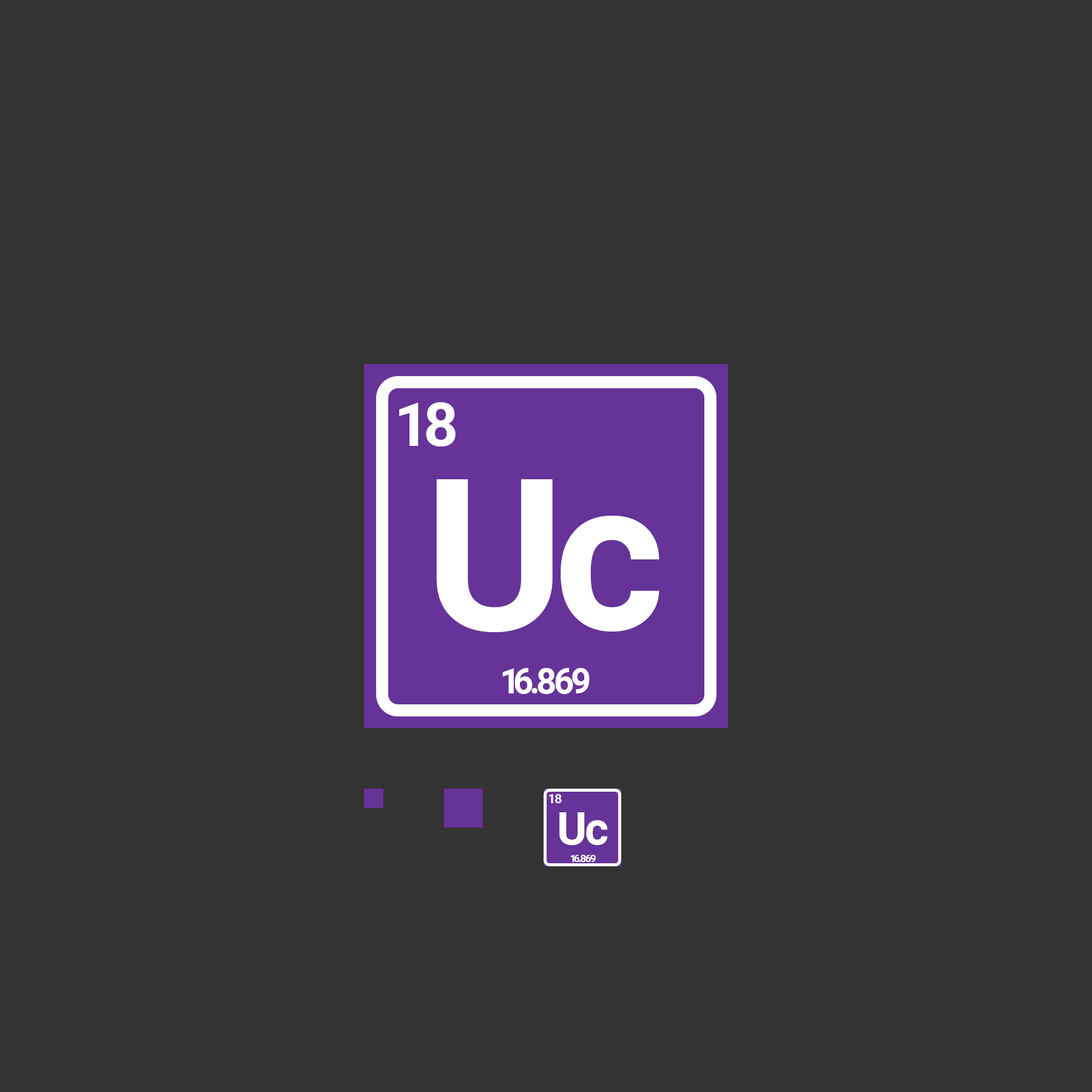
<style>
.page{position:relative;width:1092px;height:1092px;background:#333333}
.page>*{position:absolute;margin:0}
.t1{font:60.7px "Roboto-Bold";letter-spacing:-0.1em;color:#ffffff}
.t2{font:212.3px "Roboto-Bold";letter-spacing:-0.04em;color:#ffffff}
.t3{font:35.4px "Roboto-Bold";letter-spacing:-0.11em;color:#ffffff}
.t4{font:35.4px "Roboto-Bold";letter-spacing:-0.2em;color:#ffffff}
.t5{font:35.4px "Roboto-Bold";letter-spacing:-0.08em;color:#ffffff}
.t6{font:35.4px "Roboto-Bold";letter-spacing:-0.09em;color:#ffffff}
.t7{font:12.6px "Roboto-Bold";letter-spacing:-0.04em;color:#ffffff}
.t8{font:45.5px "Roboto-Bold";letter-spacing:-0.04em;color:#ffffff}
.t9{font:10.1px "Roboto-Bold";letter-spacing:-0.11em;color:#ffffff}
.t10{font:10.1px "Roboto-Bold";letter-spacing:-0.2em;color:#ffffff}
.t11{font:10.1px "Roboto-Bold";letter-spacing:-0.08em;color:#ffffff}
.t12{font:10.1px "Roboto-Bold";letter-spacing:-0.09em;color:#ffffff}
</style>
<div class="page">
<p class="t1" style="left:399px;top:402px;width:57px;height:45px">18</p>
<p class="t2" style="left:436px;top:479px;width:117px;height:153px">U</p>
<p class="t2" style="left:561px;top:516px;width:98px;height:116px">c</p>
<p class="t3" style="left:502px;top:668px;width:88px;height:26px"><span class="t4">1</span>6.<span class="t5">8</span><span class="t6">69</span></p>
<p class="t7" style="left:549px;top:794px;width:13px;height:9px">18</p>
<p class="t8" style="left:559px;top:812px;width:49px;height:33px">Uc</p>
<p class="t9" style="left:570px;top:855px;width:26px;height:7px"><span class="t10">1</span>6.<span class="t11">8</span><span class="t12">69</span></p>
</div>
